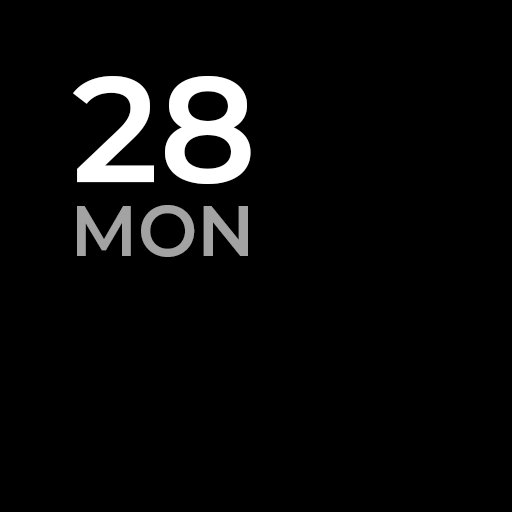
<style>
.page{position:relative;width:512px;height:512px;background:#000000}
.page>*{position:absolute;margin:0}
.t1{font:149.2px "Montserrat-SemiBold";color:#ffffff}
.t2{font:71.7px "Montserrat-SemiBold";color:#a3a3a3}
</style>
<div class="page">
<p class="t1" style="left:73px;top:76px;width:178px;height:108px">28</p>
<p class="t2" style="left:77px;top:205px;width:171px;height:52px">MON</p>
</div>
